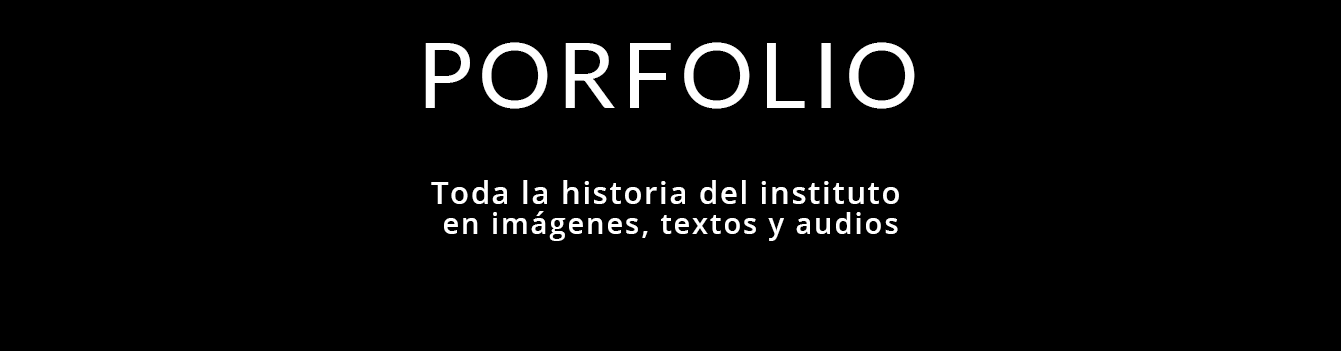
<style>
.page{position:relative;width:1341px;height:351px;background:#000000}
.page>*{position:absolute;margin:0}
.t1{font:92px "Lato-Regular";letter-spacing:0.06em;color:#ffffff}
.t2{font:30.7px/30.7px "OpenSans-Semibold";letter-spacing:0.06em;color:#ffffff}
.t3{font:29.3px/30.7px "OpenSans-Semibold";letter-spacing:0.06em;color:#ffffff}
</style>
<div class="page">
<p class="t1" style="left:425px;top:42px;width:490px;height:67px">PORFOLIO</p>
<p class="t2" style="left:431px;top:180px;width:468px;height:61px;text-align:center">Toda la historia del instituto <br><span class="t3">en imágenes, textos y audios</span></p>
</div>
